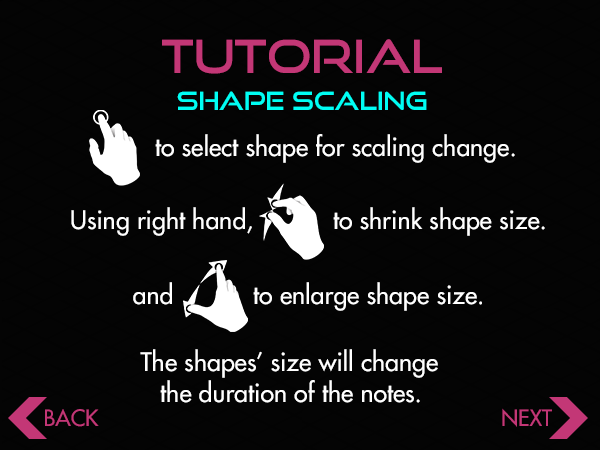
<style>
.page{position:relative;width:600px;height:450px;background:#040404}
.page>*{position:absolute;margin:0}
.t1{font:45.8px "GoodTimesRg-Regular";color:#c33776}
.t2{font:25px "GoodTimesRg-Regular";color:#00fef4}
.t3{font:25px "FuturaLT";color:#ffffff}
.t4{font:21.9px "FuturaLT";color:#c33776}
</style>
<div class="page">
<p class="t1" style="left:162px;top:39px;width:280px;height:35px">TUTORIAL</p>
<p class="t2" style="left:177px;top:91px;width:250px;height:19px">SHAPE SCALING</p>
<p class="t3" style="left:155px;top:134px;width:360px;height:29px">to select shape for scaling change.</p>
<p class="t3" style="left:71px;top:207px;width:474px;height:29px">Using right hand,           to shrink shape size.</p>
<p class="t3" style="left:133px;top:282px;width:349px;height:29px">and           to enlarge shape size.</p>
<p class="t3" style="left:140px;top:349px;width:298px;height:29px">The shapes’ size will change</p>
<p class="t3" style="left:160px;top:380px;width:260px;height:23px">the duration of the notes.</p>
<p class="t4" style="left:45px;top:409px;width:54px;height:18px">BACK</p>
<p class="t4" style="left:502px;top:408px;width:50px;height:19px">NEXT</p>
</div>
